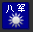
<style>
.page{position:relative;width:33px;height:32px;background:#000090}
.page>*{position:absolute;margin:0}
.t1{font:10.4px "SimSun";color:#ffffff}
</style>
<div class="page">
<p class="t1" style="left:6px;top:4px;width:19px;height:9px">八军</p>
</div>
